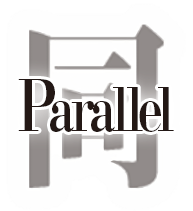
<style>
.page{position:relative;width:193px;height:211px;background:#fefefe}
.page>*{position:absolute;margin:0}
.t1{font:60px "KochoStd-Heavy";letter-spacing:-0.1em;color:#231815;scale:0.8 1}
.t2{font:70px "KochoStd-Heavy";letter-spacing:-0.1em;color:#231815;scale:0.8 1}
</style>
<div class="page">
<p class="t1" style="left:18px;top:79px;width:156px;height:53px"><span class="t2">P</span>arallel</p>
</div>
